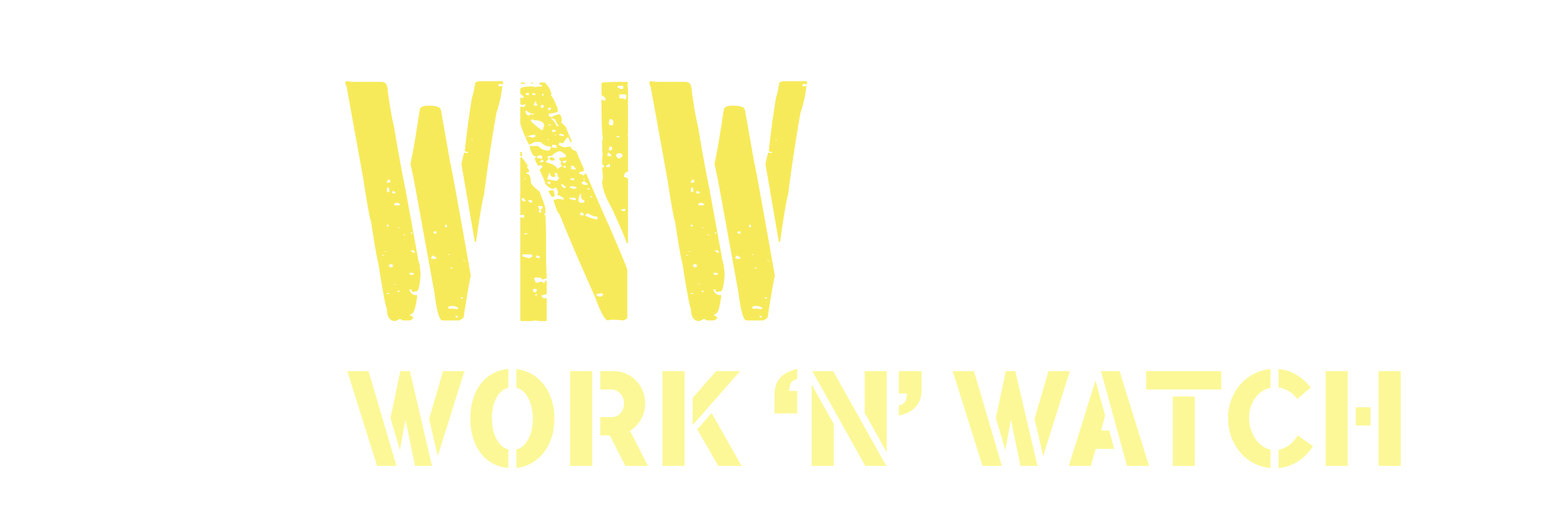
<style>
.page{position:relative;width:1568px;height:523px;background:#ffffff}
.page>*{position:absolute;margin:0}
.t1{font:338.3px "EastBorder";color:#f7ea5a}
.t2{font:132.8px "FLAMANTESTEN";color:#fcf898}
</style>
<div class="page">
<p class="t1" style="left:345px;top:81px;width:462px;height:240px">WNW</p>
<p class="t2" style="left:347px;top:369px;width:1054px;height:99px">WORK ‘N’ WATCH</p>
</div>
